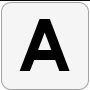
<style>
.page{position:relative;width:90px;height:90px;background:#f5f5f5}
.page>*{position:absolute;margin:0}
.t1{font:72px "CenturyGothic-Bold";color:#000000}
</style>
<div class="page">
<p class="t1" style="left:19px;top:18px;width:51px;height:52px">A</p>
</div>
